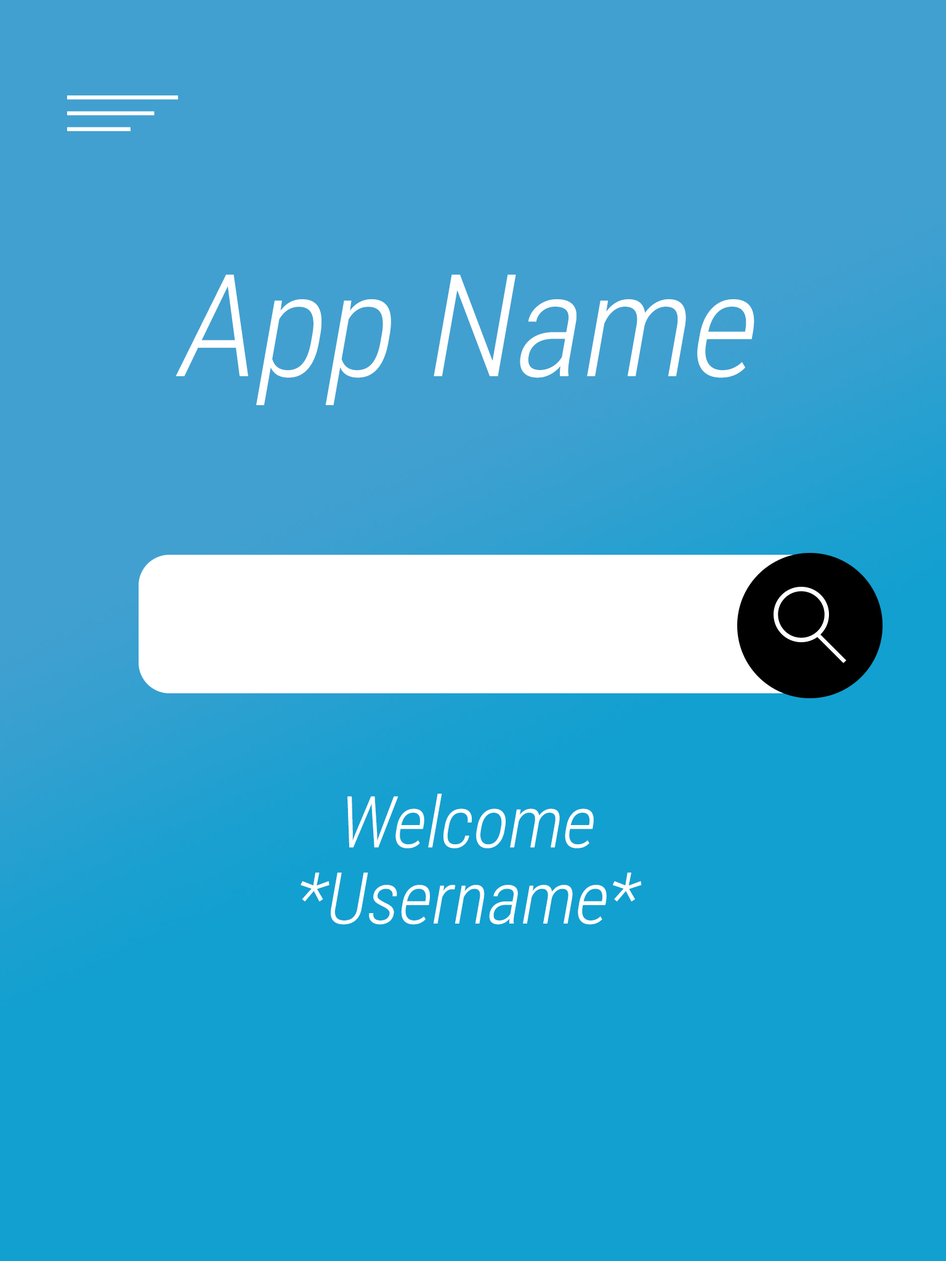
<style>
.page{position:relative;width:946px;height:1261px;background:#12a0d0}
.page>*{position:absolute;margin:0}
.t1{font:142.7px "RobotoCondensed-Light";color:#ffffff;font-style:italic}
.t2{font:71.3px/76.1px "RobotoCondensed-Light";color:#ffffff;font-style:italic}
</style>
<div class="page">
<p class="t1" style="left:175px;top:275px;width:579px;height:130px">App Name</p>
<p class="t2" style="left:300px;top:794px;width:342px;height:131px;text-align:center">Welcome *Username*</p>
</div>
